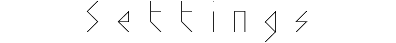
<style>
.page{position:relative;width:396px;height:43px;background:#ffffff}
.page>*{position:absolute;margin:0}
.t1{font:43.4px "Stick-Light";color:#000000}
</style>
<div class="page">
<p class="t1" style="left:86px;top:1px;width:222px;height:41px">Settings</p>
</div>
